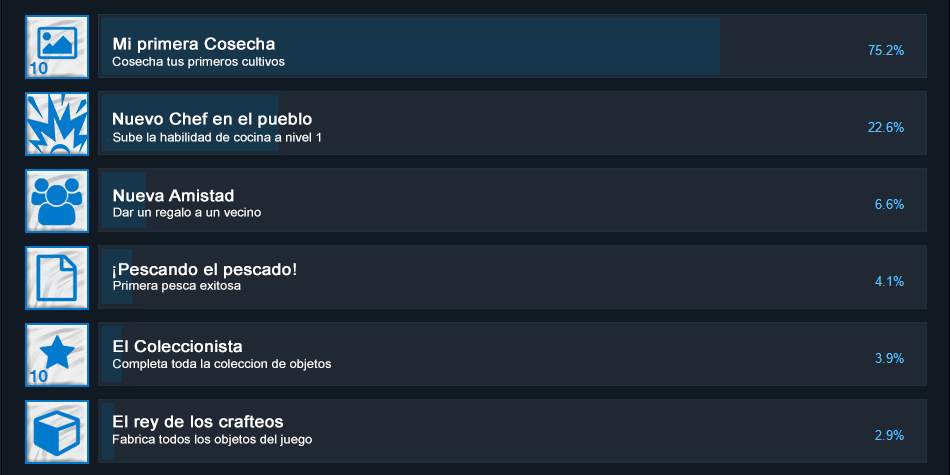
<style>
.page{position:relative;width:950px;height:475px;background:#1f2833}
.page>*{position:absolute;margin:0}
.t1{font:16px "ArialMT";color:#ffffff;font-weight:bold;scale:1.08 1}
.t2{font:12px "ArialMT";color:#ffffff;scale:1.08 1}
.t3{font:12px "ArialMT";color:#ffffff;font-weight:bold;scale:1.08 1}
</style>
<div class="page">
<p class="t1" style="left:113px;top:37px;width:162px;height:16px">Mi primera Cosecha</p>
<p class="t2" style="left:112px;top:56px;width:173px;height:13px">Cosecha tus primeros cultivos</p>
<p class="t1" style="left:113px;top:112px;width:199px;height:16px">Nuevo Chef en el pueblo</p>
<p class="t2" style="left:113px;top:132px;width:208px;height:10px">Sube la habilidad de cocina a nivel 1</p>
<p class="t3" style="left:113px;top:189px;width:121px;height:13px">Nueva Amistad</p>
<p class="t2" style="left:113px;top:207px;width:148px;height:12px">Dar un regalo a un vecino</p>
<p class="t3" style="left:113px;top:263px;width:183px;height:16px">¡Pescando el pescado!</p>
<p class="t2" style="left:113px;top:281px;width:128px;height:12px">Primera pesca exitosa</p>
<p class="t1" style="left:113px;top:340px;width:129px;height:13px">El Coleccionista</p>
<p class="t2" style="left:113px;top:359px;width:218px;height:12px">Completa toda la coleccion de objetos</p>
<p class="t1" style="left:113px;top:415px;width:170px;height:16px">El rey de los crafteos</p>
<p class="t2" style="left:113px;top:434px;width:199px;height:12px">Fabrica todos los objetos del juego</p>
</div>
